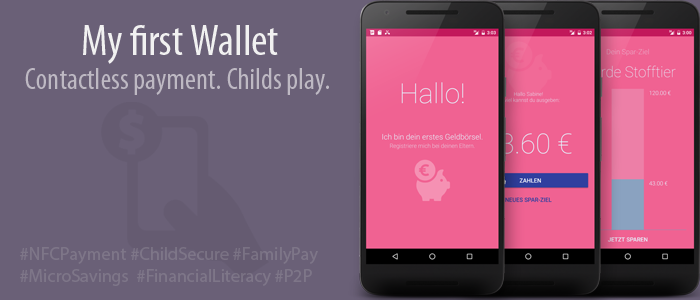
<style>
.page{position:relative;width:700px;height:300px;background:#6a6077}
.page>*{position:absolute;margin:0}
.t1{font:44px "MyriadPro-Cond";color:#f1f1f1}
.t2{font:30px "MyriadPro-Cond";color:#beb9c3}
.t3{font:18px "MyriadPro-Regular";color:#7e7688}
</style>
<div class="page">
<p class="t1" style="left:83px;top:25px;width:195px;height:39px">My first Wallet</p>
<p class="t2" style="left:25px;top:68px;width:304px;height:27px">Contactless payment. Childs play.</p>
<p class="t3" style="left:20px;top:247px;width:298px;height:39px">#NFCPayment #ChildSecure #FamilyPay #MicroSavings  #FinancialLiteracy #P2P</p>
</div>
